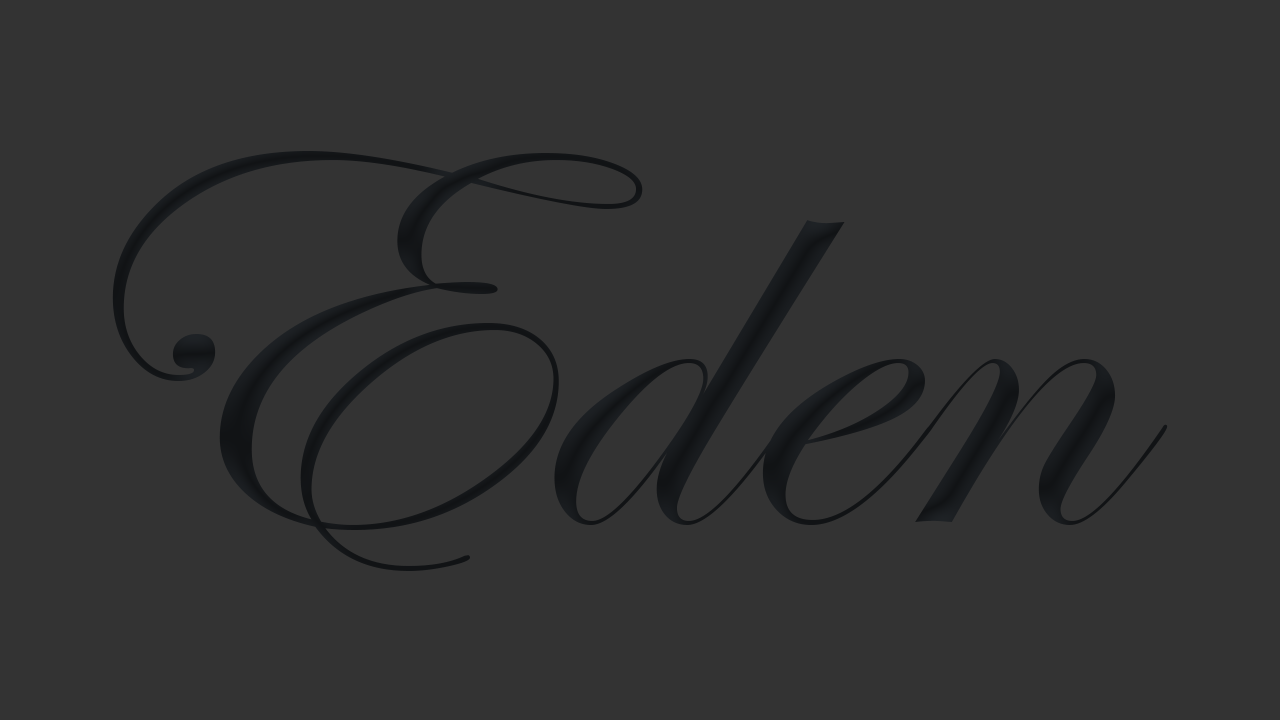
<style>
.page{position:relative;width:1280px;height:720px;background:#333333}
.page>*{position:absolute;margin:0}
.t1{font:600px "EdwardianScriptITC";color:#141719}
</style>
<div class="page">
<p class="t1" style="left:112px;top:151px;width:1056px;height:420px">Eden</p>
</div>
